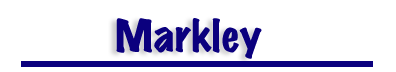
<style>
.page{position:relative;width:396px;height:72px;background:#ffffff}
.page>*{position:absolute;margin:0}
.t1{font:40px "MarkerFeltWide-Plain-Regular";letter-spacing:0.02em;color:#0b007e}
.t2{font:30px "MarkerFeltWide-Plain-Regular";letter-spacing:0.02em;color:#0b007e}
</style>
<div class="page">
<p class="t1" style="left:116px;top:18px;width:146px;height:41px"><span class="t2">         </span>   Markley</p>
</div>
